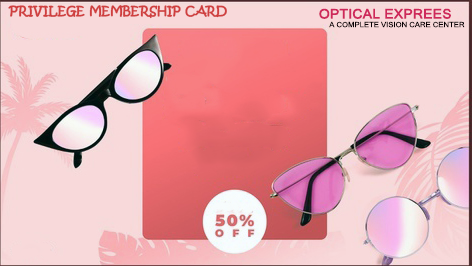
<style>
.page{position:relative;width:472px;height:266px;background:#f8d9da}
.page>*{position:absolute;margin:0}
.t1{font:12px "KristenITC-Regular";color:#cf3f3f;font-variant:small-caps;font-weight:bold}
.t2{font:7.3px "MicrosoftSansSerif";color:#080103;font-variant:small-caps;scale:1.05 1}
.t3{font:13px "MicrosoftSansSerif";color:#ce285b;font-variant:small-caps;font-weight:bold;scale:1.05 1}
</style>
<div class="page">
<p class="t1" style="left:8px;top:5px;width:219px;height:14px">PRIVILEGE MEMBERSHIP CARD</p>
<p class="t2" style="left:319px;top:8px;width:146px;height:20px"><span class="t3">OPTICAL EXPREES <br></span>     A COMPLETE VISION CARE CENTER</p>
</div>
